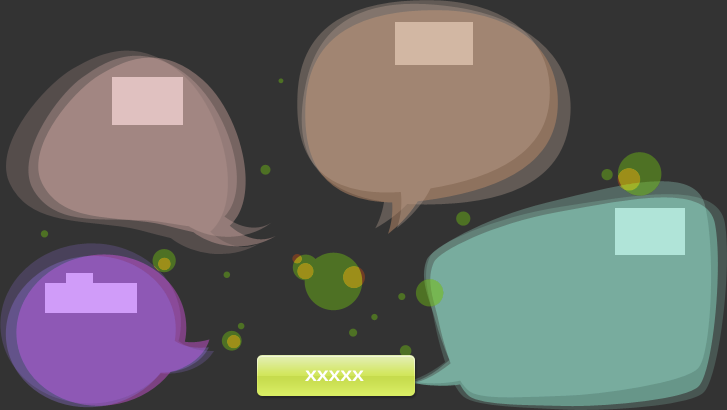
<style>
.page{position:relative;width:727px;height:410px;background:#333333}
.page>*{position:absolute;margin:0}
.t1{font:18px "FZLTZHK--GBK1-0";color:#ffffff;font-weight:bold}
</style>
<div class="page">
<p class="t1" style="left:305px;top:370px;width:59px;height:11px">xxxxx</p>
</div>
